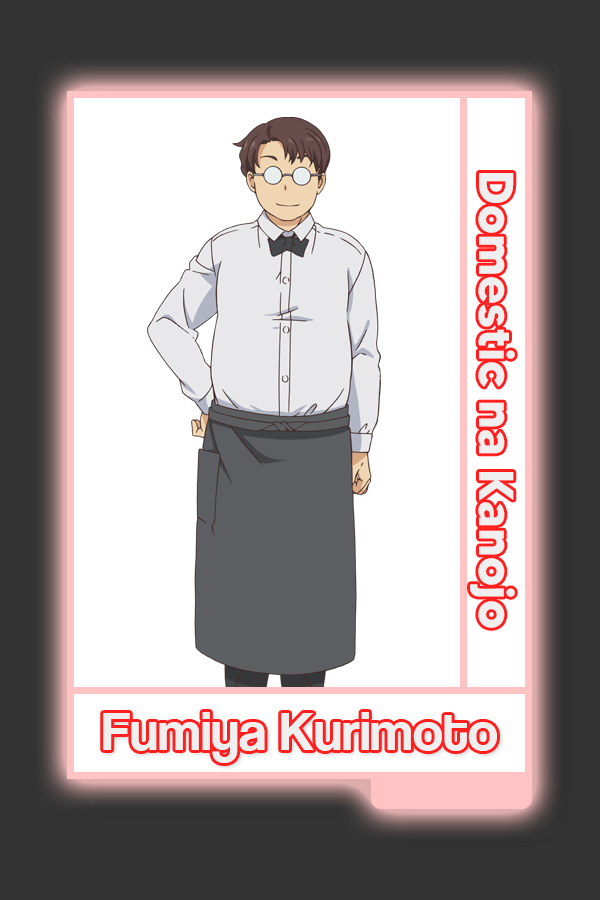
<style>
.page{position:relative;width:600px;height:900px;background:#ffffff}
.page>*{position:absolute;margin:0}
.t1{font:48.8px "MADETOMMY-Bold";color:#f0efef}
.t2{font:56.3px "CoolveticaRg-Regular";color:#f0efef}
</style>
<div class="page">
<p class="t1" style="left:470px;top:173px;width:45px;height:455px;rotate:90deg">Domestic na Kanojo</p>
<p class="t2" style="left:103px;top:712px;width:394px;height:51px">Fumiya Kurimoto</p>
</div>
